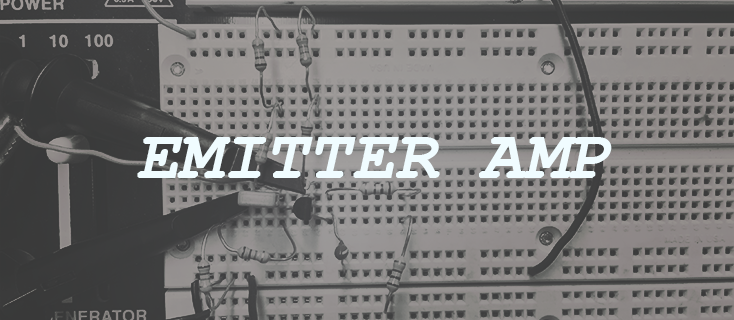
<style>
.page{position:relative;width:734px;height:320px}
.page>*{position:absolute;margin:0}
.t1{font:72px "CourierNewPS-BoldItalicMT";color:#f0fcff}
</style>
<div class="page">
<p class="t1" style="left:137px;top:137px;width:475px;height:41px">EMITTER AMP</p>
</div>
